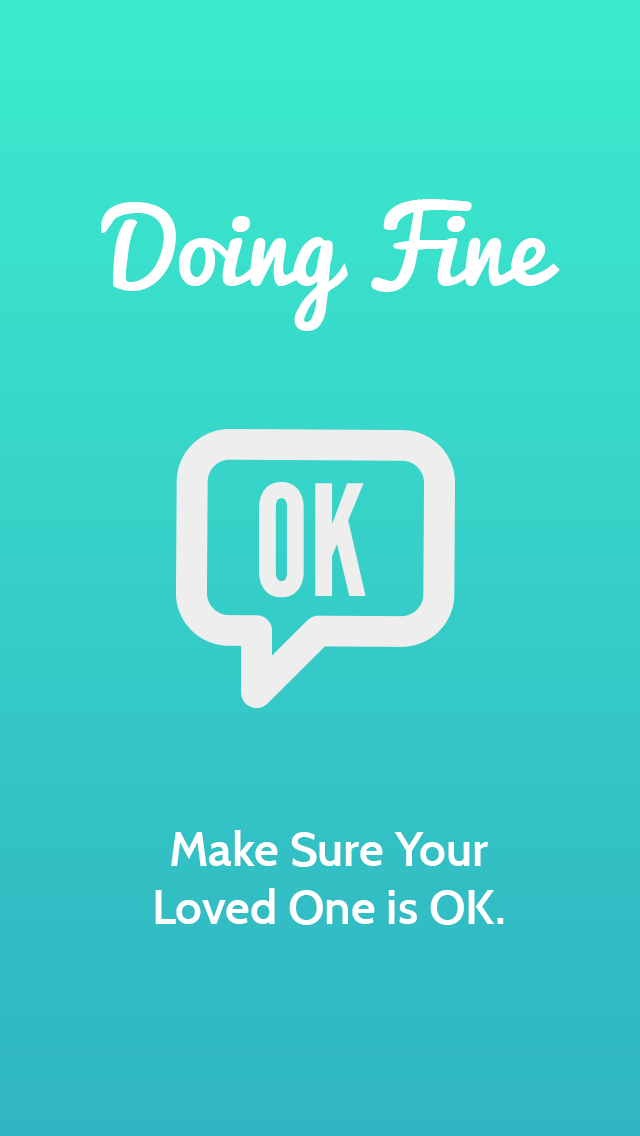
<style>
.page{position:relative;width:640px;height:1136px}
.page>*{position:absolute;margin:0}
.t1{font:99.8px "Pacifico";color:#ffffff}
.t2{font:48px "Cabin-SemiBold";color:#ffffff}
</style>
<div class="page">
<p class="t1" style="left:101px;top:199px;width:459px;height:132px">Doing Fine</p>
<p class="t2" style="left:155px;top:830px;width:349px;height:95px;text-align:center">Make Sure Your <br>Loved One is OK.</p>
</div>
